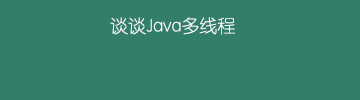
<style>
.page{position:relative;width:360px;height:100px;background:#337d6b}
.page>*{position:absolute;margin:0}
.t1{font:18px "STYuanti-TC-Light";color:#fcfdfd}
</style>
<div class="page">
<p class="t1" style="left:110px;top:17px;width:126px;height:18px">谈谈Java多线程</p>
</div>
